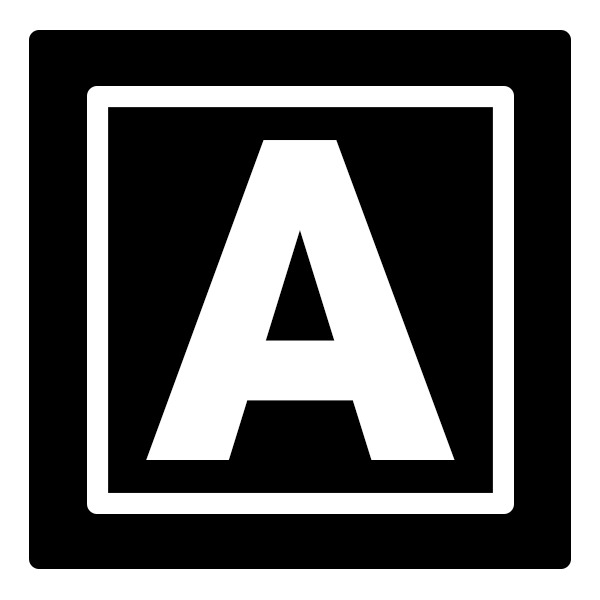
<style>
.page{position:relative;width:600px;height:600px;background:#000000}
.page>*{position:absolute;margin:0}
.t1{font:450px "Roboto-Black";color:#ffffff}
</style>
<div class="page">
<p class="t1" style="left:146px;top:140px;width:309px;height:320px">A</p>
</div>
